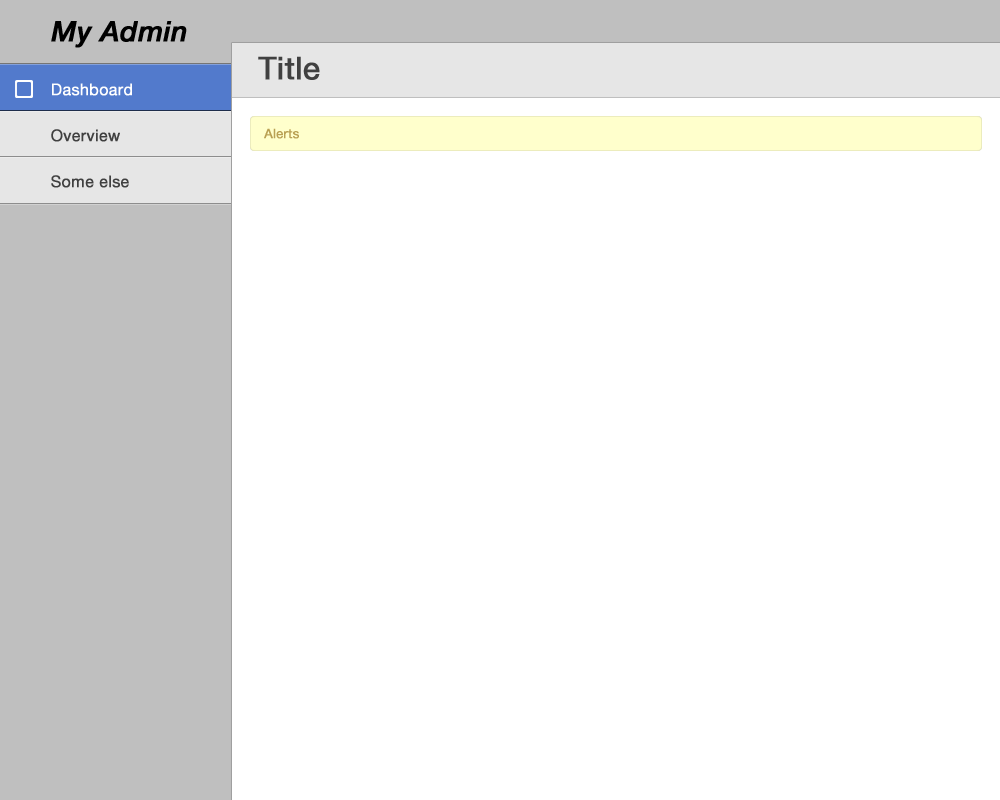
<style>
.page{position:relative;width:1000px;height:800px;background:#ffffff}
.page>*{position:absolute;margin:0}
.t1{font:28px "HelveticaNeueLTPro-MdIt";color:#000000;font-weight:bold}
.t2{font:31px "HelveticaNeueLTPro-Roman";color:#404040;font-weight:bold}
.t3{font:16px "HelveticaNeueLTPro-Roman";color:#ffffff;font-weight:bold}
.t4{font:16px "HelveticaNeueLTPro-Roman";color:#404040;font-weight:bold}
.t5{font:13px "HelveticaNeueLTPro-Roman";color:#b9a053;font-weight:bold}
</style>
<div class="page">
<p class="t1" style="left:51px;top:21px;width:136px;height:27px">My Admin</p>
<p class="t2" style="left:258px;top:56px;width:62px;height:24px">Title</p>
<p class="t3" style="left:52px;top:83px;width:80px;height:13px">Dashboard</p>
<p class="t4" style="left:51px;top:129px;width:69px;height:13px">Overview</p>
<p class="t5" style="left:264px;top:128px;width:35px;height:11px">Alerts</p>
<p class="t4" style="left:51px;top:175px;width:78px;height:13px">Some else</p>
</div>
